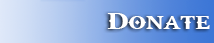
<style>
.page{position:relative;width:214px;height:43px}
.page>*{position:absolute;margin:0}
.t1{font:26px "GodOfWar";color:#ffffff}
</style>
<div class="page">
<p class="t1" style="left:107px;top:13px;width:103px;height:16px">Donate</p>
</div>
